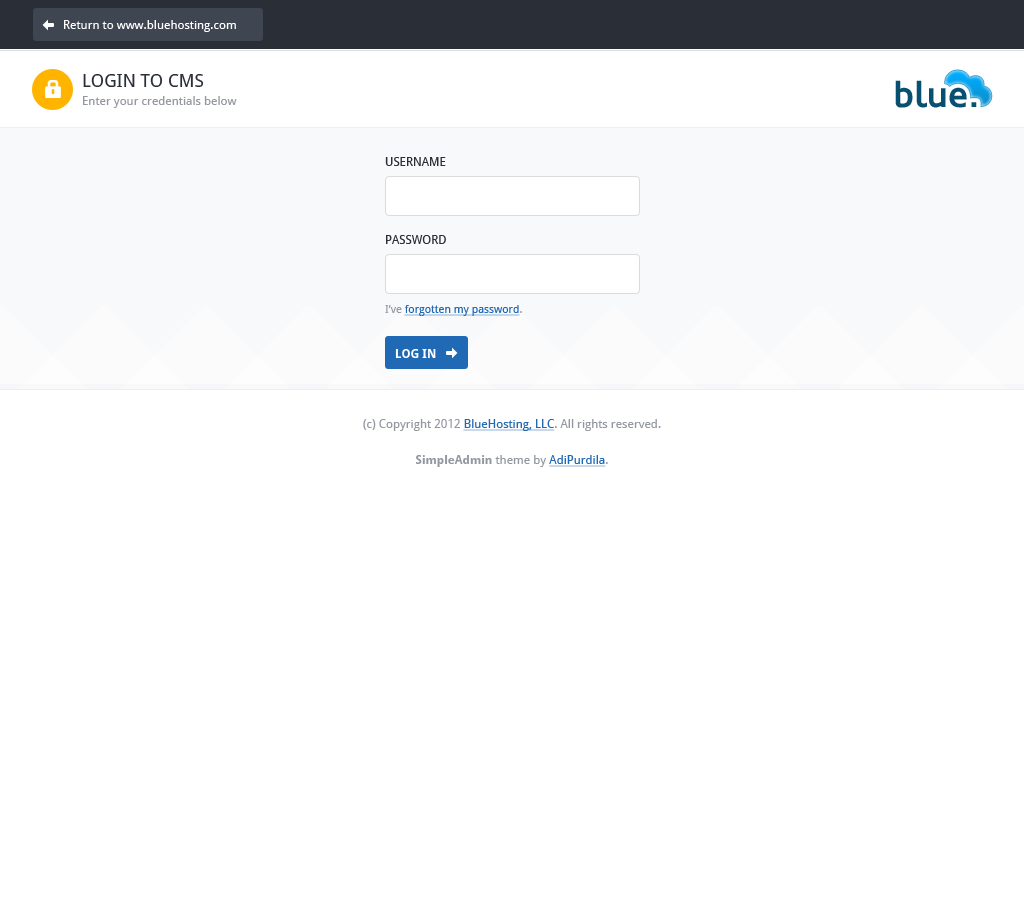
<style>
.page{position:relative;width:1024px;height:900px;background:#ffffff}
.page>*{position:absolute;margin:0}
.t1{font:12px "DroidSans";color:#ffffff}
.t2{font:12px/18px "DroidSans";color:#9498a1}
.t3{font:18px/18px "DroidSans";color:#2a2e36;text-transform:uppercase}
.t4{font:35.9px "Oblik-Bold";color:#085071}
.t5{font:12px "DroidSans";color:#2a2e36;text-transform:uppercase}
.t6{font:11px "DroidSans";color:#2069b4;text-decoration:underline}
.t7{font:11px "DroidSans";color:#9498a1}
.t8{font:12px "DroidSans-Bold";color:#ffffff}
.t9{font:12px/18px "DroidSans";color:#2069b4;text-decoration:underline}
.t10{font:12px/18px "DroidSans-Bold";color:#9498a1}
</style>
<div class="page">
<p class="t1" style="left:64px;top:20px;width:172px;height:12px">Return to www.bluehosting.com</p>
<p class="t2" style="left:83px;top:74px;width:154px;height:34px"><span class="t3">Login to CMS<br></span>Enter your credentials below</p>
<p class="t4" style="left:895px;top:80px;width:82px;height:28px">blue.</p>
<p class="t5" style="left:385px;top:157px;width:61px;height:9px">Username</p>
<p class="t5" style="left:386px;top:235px;width:60px;height:9px">password</p>
<p class="t6" style="left:385px;top:305px;width:137px;height:11px"><span class="t7">I’ve </span>forgotten my password<span class="t7">.</span></p>
<p class="t8" style="left:395px;top:349px;width:41px;height:9px">LOG IN</p>
<p class="t2" style="left:363px;top:419px;width:298px;height:48px;text-align:center">(c) Copyright 2012 <span class="t9">BlueHosting, LLC</span>. All rights reserved.<br><br><span class="t10">SimpleAdmin</span> theme by <span class="t9">AdiPurdila</span>.</p>
</div>
